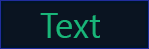
<style>
.page{position:relative;width:149px;height:49px;background:#0a1421}
.page>*{position:absolute;margin:0}
.t1{font:35px "SegoeUISymbol";color:#19b579}
</style>
<div class="page">
<p class="t1" style="left:40px;top:13px;width:60px;height:25px">Text</p>
</div>
